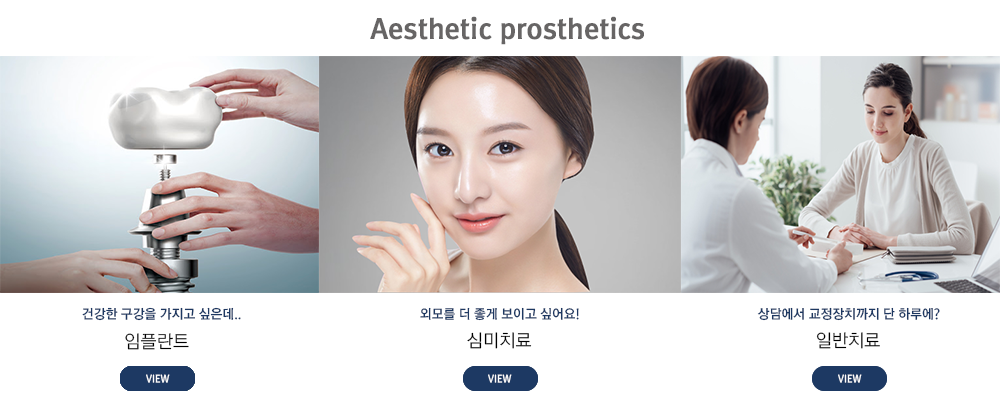
<style>
.page{position:relative;width:1000px;height:400px;background:#ffffff}
.page>*{position:absolute;margin:0}
.t1{font:27px "RixGoB";color:#676565;font-weight:bold}
.t2{font:13px "RixGoB";color:#1d3862}
.t3{font:17.8px "RixGoL";color:#000000}
.t4{font:10.2px "RixGoB";color:#ffffff;scale:0.95 1}
</style>
<div class="page">
<p class="t1" style="left:370px;top:16px;width:274px;height:29px">Aesthetic prosthetics</p>
<p class="t2" style="left:82px;top:307px;width:159px;height:14px">건강한 구강을 가지고 싶은데..</p>
<p class="t2" style="left:420px;top:307px;width:159px;height:14px">외모를 더 좋게 보이고 싶어요!</p>
<p class="t2" style="left:757px;top:307px;width:183px;height:14px">상담에서 교정장치까지 단 하루에?</p>
<p class="t3" style="left:125px;top:333px;width:64px;height:17px">임플란트</p>
<p class="t3" style="left:467px;top:332px;width:65px;height:17px">심미치료</p>
<p class="t3" style="left:816px;top:332px;width:64px;height:17px">일반치료</p>
<p class="t4" style="left:146px;top:374px;width:24px;height:9px">VIEW</p>
<p class="t4" style="left:488px;top:374px;width:24px;height:9px">VIEW</p>
<p class="t4" style="left:838px;top:374px;width:24px;height:9px">VIEW</p>
</div>
